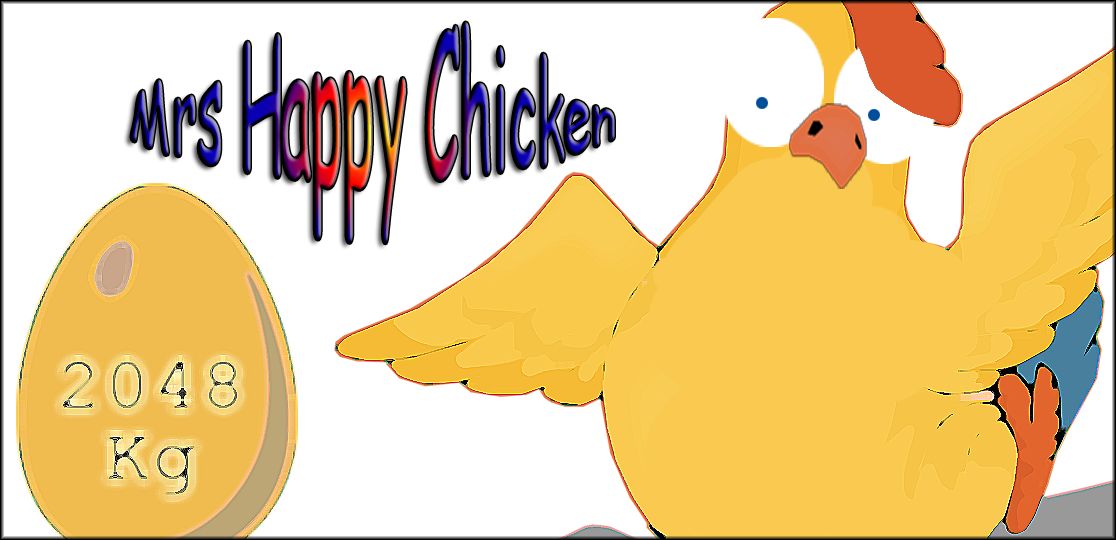
<style>
.page{position:relative;width:1116px;height:540px;background:#ffffff}
.page>*{position:absolute;margin:0}
.t1{font:52.4px "ComicSansMS";scale:1.04 1}
</style>
<div class="page">
<p class="t1" style="left:131px;top:22px;width:484px;height:222px;text-align:center">Mrs Happy Chicken</p>
</div>
